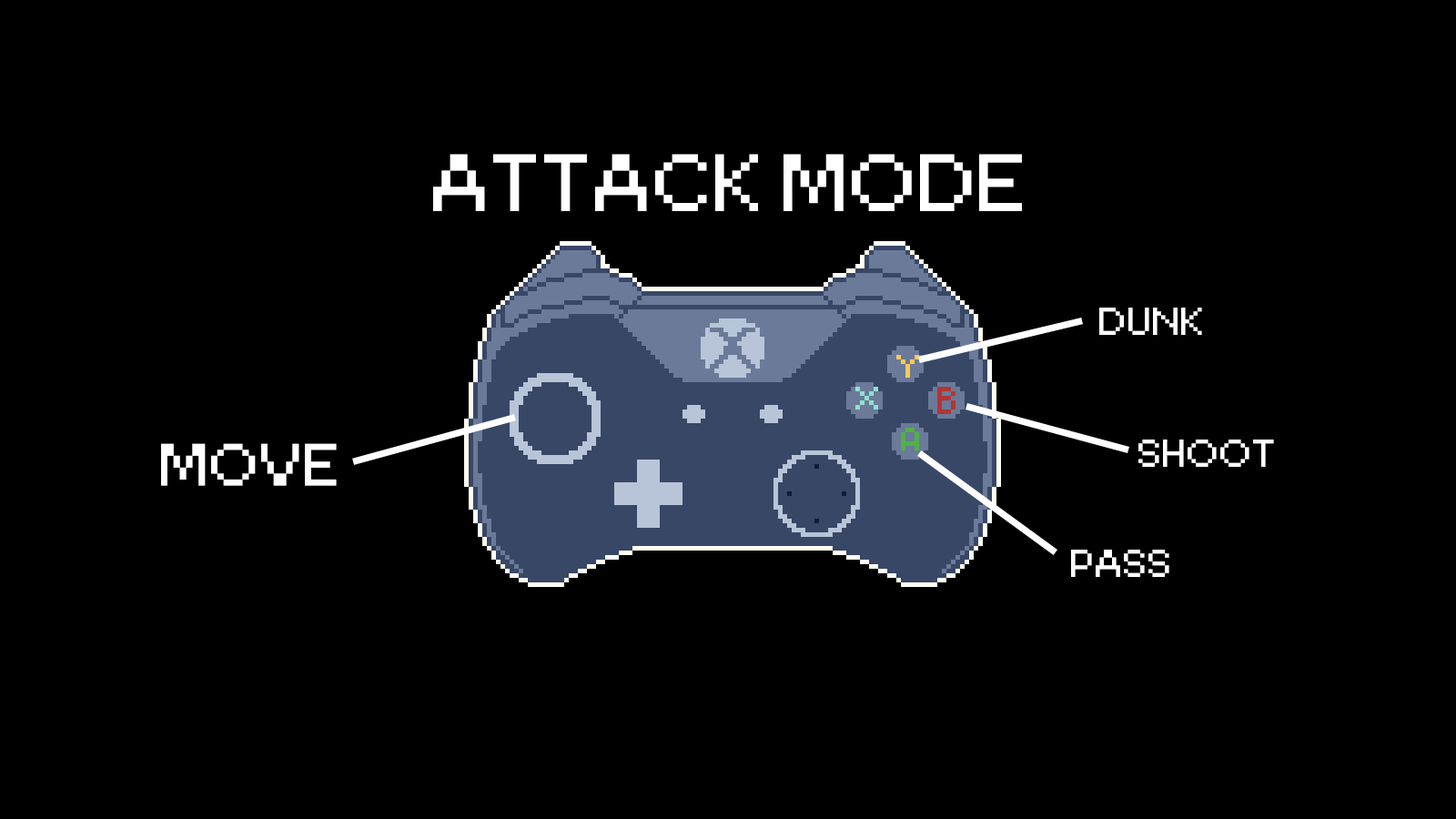
<style>
.page{position:relative;width:1456px;height:819px;background:#000000}
.page>*{position:absolute;margin:0}
.t1{font:129.7px "Resource";color:#ffffff;scale:1.05 1}
.t2{font:62.2px "Resource";color:#ffffff;scale:1.05 1}
.t3{font:95.2px "Resource";color:#ffffff;scale:1.05 1}
</style>
<div class="page">
<p class="t1" style="left:433px;top:154px;width:589px;height:57px">ATTACK MODE</p>
<p class="t2" style="left:1099px;top:308px;width:103px;height:27px">DUNK</p>
<p class="t3" style="left:161px;top:443px;width:176px;height:43px">MOVE</p>
<p class="t2" style="left:1138px;top:440px;width:136px;height:27px">SHOOT</p>
<p class="t2" style="left:1071px;top:550px;width:98px;height:27px">PASS</p>
</div>
